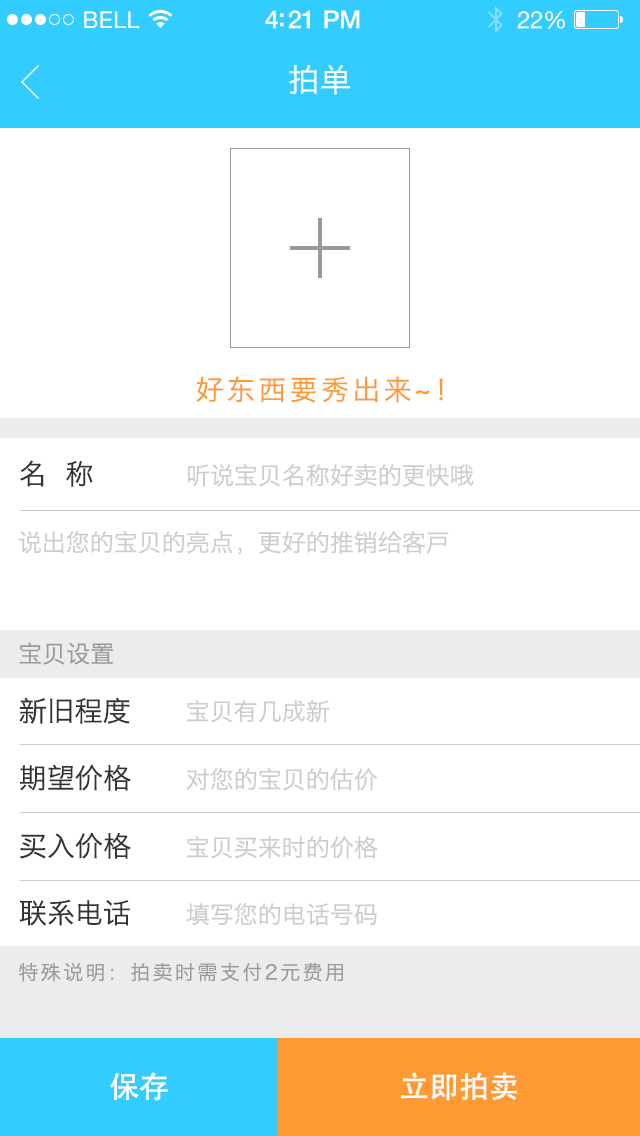
<style>
.page{position:relative;width:640px;height:1136px;background:#ffffff}
.page>*{position:absolute;margin:0}
.t1{font:23px "HelveticaNeue";letter-spacing:0.02em;color:#ffffff}
.t2{font:25px "HelveticaNeue-Medium";letter-spacing:-0.02em;color:#ffffff}
.t3{font:24px "HelveticaNeue";letter-spacing:-0.02em;color:#ffffff}
.t4{font:32px "MingHei_R";color:#ffffff}
.t5{font:28px "MingHei_R";letter-spacing:0.12em;color:#ff9933}
.t6{font:28px "MingHei_R";color:#333333}
.t7{font:24px "MingHei_R";color:#cccccc}
.t8{font:24px "MingHei_R";color:#999999}
.t9{font:20px "MingHei_R";letter-spacing:0.12em;color:#999999}
.t10{font:30px "AdobeHeitiStd-Regular";color:#ffffff}
</style>
<div class="page">
<p class="t1" style="left:84px;top:11px;width:56px;height:17px">BELL</p>
<p class="t2" style="left:265px;top:10px;width:95px;height:19px">4:21 PM</p>
<p class="t3" style="left:517px;top:11px;width:48px;height:18px">22%</p>
<p class="t4" style="left:289px;top:65px;width:61px;height:30px">拍单</p>
<p class="t5" style="left:196px;top:376px;width:247px;height:27px">好东西要秀出来~！</p>
<p class="t6" style="left:20px;top:460px;width:73px;height:27px">名  称</p>
<p class="t7" style="left:188px;top:464px;width:286px;height:23px">听说宝贝名称好卖的更快哦</p>
<p class="t7" style="left:18px;top:531px;width:431px;height:24px">说出您的宝贝的亮点，更好的推销给客户</p>
<p class="t8" style="left:19px;top:642px;width:94px;height:23px">宝贝设置</p>
<p class="t6" style="left:19px;top:697px;width:111px;height:27px">新旧程度</p>
<p class="t7" style="left:187px;top:700px;width:142px;height:23px">宝贝有几成新</p>
<p class="t6" style="left:20px;top:764px;width:111px;height:27px">期望价格</p>
<p class="t7" style="left:186px;top:768px;width:192px;height:23px">对您的宝贝的估价</p>
<p class="t6" style="left:19px;top:832px;width:112px;height:27px">买入价格</p>
<p class="t7" style="left:187px;top:836px;width:191px;height:23px">宝贝买来时的价格</p>
<p class="t6" style="left:19px;top:899px;width:111px;height:27px">联系电话</p>
<p class="t7" style="left:186px;top:903px;width:191px;height:23px">填写您的电话号码</p>
<p class="t9" style="left:19px;top:962px;width:324px;height:20px">特殊说明：拍卖时需支付2元费用</p>
<p class="t10" style="left:110px;top:1072px;width:58px;height:29px">保存</p>
<p class="t10" style="left:401px;top:1072px;width:116px;height:29px">立即拍卖</p>
</div>
